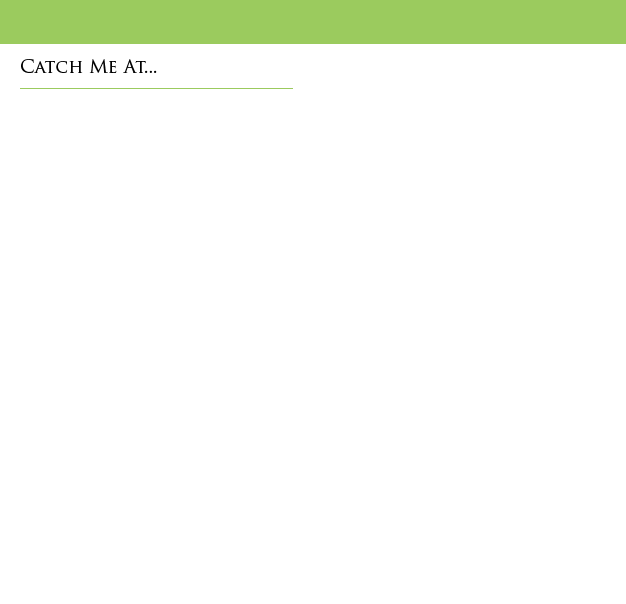
<style>
.page{position:relative;width:626px;height:604px;background:#ffffff}
.page>*{position:absolute;margin:0}
.t1{font:18px "TrajanPro-Regular";color:#010101}
</style>
<div class="page">
<p class="t1" style="left:21px;top:59px;width:136px;height:14px">Catch Me At...</p>
</div>
